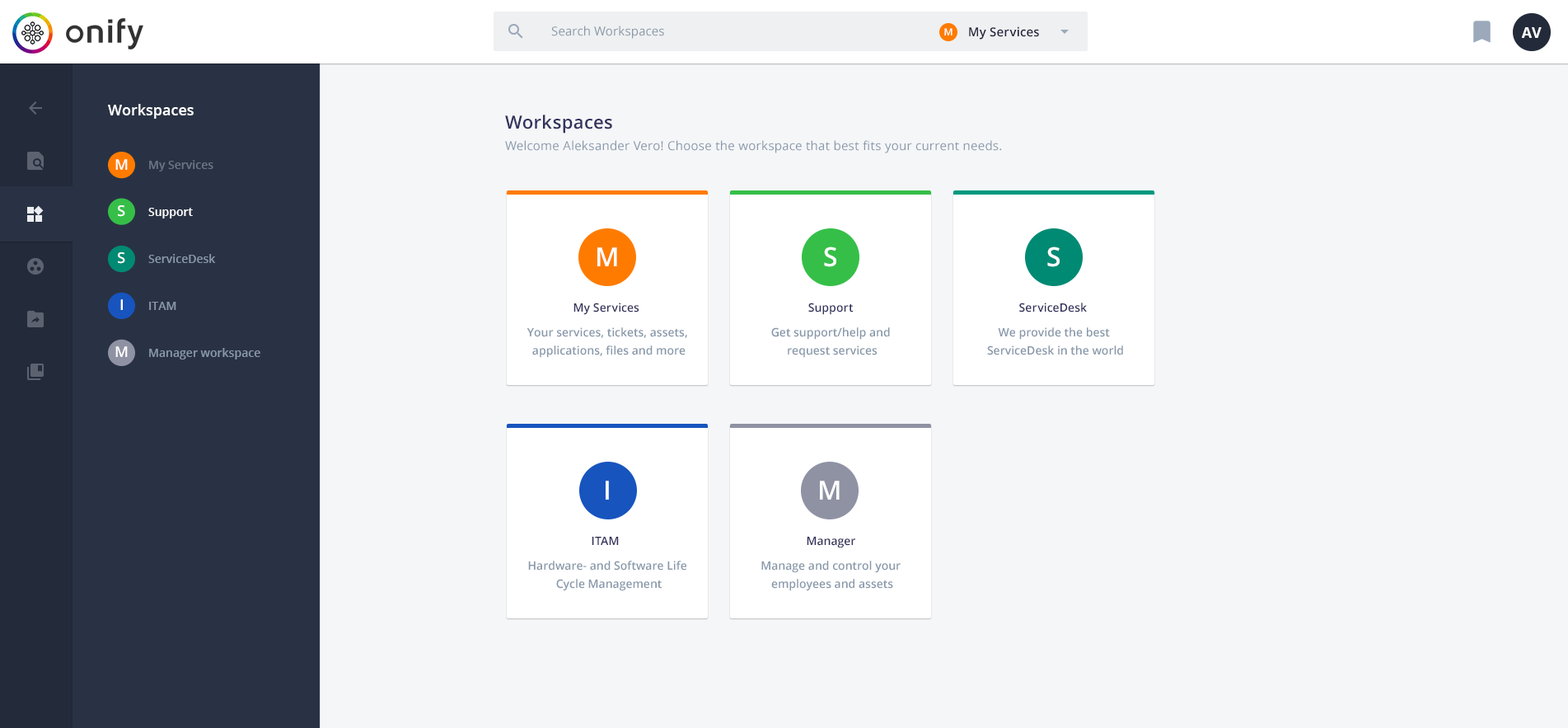
<style>
.page{position:relative;width:1568px;height:728px;background:#f5f6f8}
.page>*{position:absolute;margin:0}
.t1{font:12.4px "OpenSans";letter-spacing:0.01em;color:#8898aa}
.t2{font:9.9px "OpenSans-Semibold";letter-spacing:0.01em;color:#ffffff}
.t3{font:12.4px "OpenSans-Semibold";letter-spacing:0.01em;color:#23233d}
.t4{font:14.8px "OpenSans-Bold";color:#ffffff;text-transform:uppercase}
.t5{font:14.8px "OpenSans-Semibold";color:#ffffff}
.t6{font:18.1px "OpenSans-Semibold";letter-spacing:0.02em;color:#32325d}
.t7{font:12.4px "OpenSans";letter-spacing:0.02em;color:#8898aa}
.t8{font:14.8px "OpenSans-Semibold";letter-spacing:0.01em;color:#ffffff}
.t9{font:11.5px "OpenSans-Semibold";color:#6d7484}
.t10{font:11.5px "OpenSans-Semibold";color:#ffffff}
.t11{font:11.5px "OpenSans-Semibold";color:#8898aa}
.t12{font:26.4px "OpenSans-Semibold";letter-spacing:0.005em;color:#ffffff}
.t13{font:11.5px "OpenSans-Semibold";letter-spacing:0.005em;color:#32325d}
.t14{font:11.5px/18.1px "OpenSans-Semibold";color:#8898aa}
</style>
<div class="page">
<p class="t1" style="left:551px;top:26px;width:113px;height:13px">Search Workspaces</p>
<p class="t2" style="left:944px;top:28px;width:9px;height:7px">M</p>
<p class="t3" style="left:969px;top:26px;width:70px;height:14px">My Services</p>
<p class="t4" style="left:1521px;top:27px;width:21px;height:11px">AV</p>
<p class="t5" style="left:108px;top:104px;width:86px;height:15px">Workspaces</p>
<p class="t6" style="left:505px;top:115px;width:107px;height:18px">Workspaces</p>
<p class="t7" style="left:505px;top:140px;width:497px;height:13px">Welcome Aleksander Vero! Choose the workspace that best fits your current needs.</p>
<p class="t8" style="left:115px;top:159px;width:13px;height:11px">M</p>
<p class="t9" style="left:149px;top:160px;width:64px;height:11px">My Services</p>
<p class="t8" style="left:118px;top:205px;width:7px;height:12px">S</p>
<p class="t10" style="left:148px;top:208px;width:45px;height:10px">Support</p>
<p class="t8" style="left:118px;top:252px;width:7px;height:12px">S</p>
<p class="t11" style="left:148px;top:254px;width:68px;height:9px">ServiceDesk</p>
<p class="t12" style="left:597px;top:247px;width:20px;height:19px">M</p>
<p class="t12" style="left:824px;top:246px;width:12px;height:21px">S</p>
<p class="t12" style="left:1047px;top:246px;width:13px;height:21px">S</p>
<p class="t8" style="left:120px;top:299px;width:3px;height:11px">I</p>
<p class="t11" style="left:149px;top:302px;width:27px;height:8px">ITAM</p>
<p class="t13" style="left:573px;top:302px;width:66px;height:13px">My Services</p>
<p class="t13" style="left:808px;top:302px;width:46px;height:13px">Support</p>
<p class="t13" style="left:1019px;top:302px;width:68px;height:10px">ServiceDesk</p>
<p class="t14" style="left:527px;top:327px;width:160px;height:31px;text-align:center">Your services, tickets, assets, <br>applications, files and more</p>
<p class="t14" style="left:771px;top:327px;width:119px;height:31px;text-align:center">Get support/help and <br>request services</p>
<p class="t14" style="left:987px;top:327px;width:136px;height:28px;text-align:center">We provide the best <br>ServiceDesk in the world</p>
<p class="t8" style="left:115px;top:346px;width:13px;height:11px">M</p>
<p class="t11" style="left:149px;top:348px;width:111px;height:11px">Manager workspace</p>
<p class="t12" style="left:606px;top:480px;width:3px;height:19px">I</p>
<p class="t12" style="left:820px;top:480px;width:20px;height:19px">M</p>
<p class="t13" style="left:592px;top:536px;width:27px;height:9px">ITAM</p>
<p class="t13" style="left:807px;top:536px;width:48px;height:12px">Manager</p>
<p class="t14" style="left:528px;top:560px;width:158px;height:31px;text-align:center">Hardware- and Software Life <br>Cycle Management</p>
<p class="t14" style="left:761px;top:560px;width:140px;height:31px;text-align:center">Manage and control your <br>employees and assets</p>
</div>
